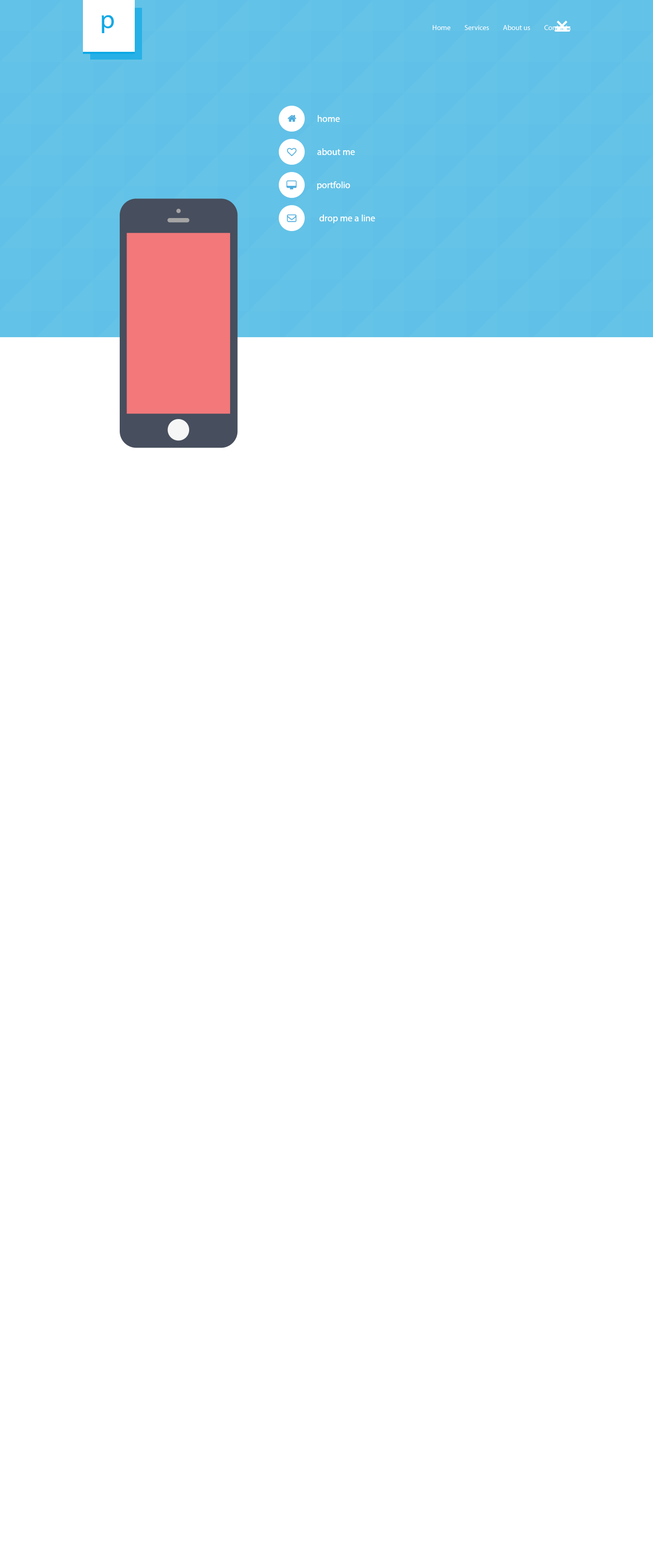
<style>
.page{position:relative;width:653px;height:1568px;background:#ffffff}
.page>*{position:absolute;margin:0}
.t1{font:25.9px "MyriadPro-Regular";color:#0da9e5}
.t2{font:7.3px "MyriadPro-Regular";color:#ffffff}
.t3{font:9.3px "MyriadPro-Regular";color:#ffffff}
</style>
<div class="page">
<p class="t1" style="left:102px;top:15px;width:12px;height:18px">p</p>
<p class="t2" style="left:433px;top:25px;width:137px;height:5px">Home         Services         About us         Contacts</p>
<p class="t3" style="left:318px;top:115px;width:22px;height:7px">home</p>
<p class="t3" style="left:317px;top:148px;width:38px;height:7px">about me</p>
<p class="t3" style="left:317px;top:181px;width:33px;height:9px">portfolio</p>
<p class="t3" style="left:319px;top:214px;width:56px;height:9px">drop me a line</p>
</div>
